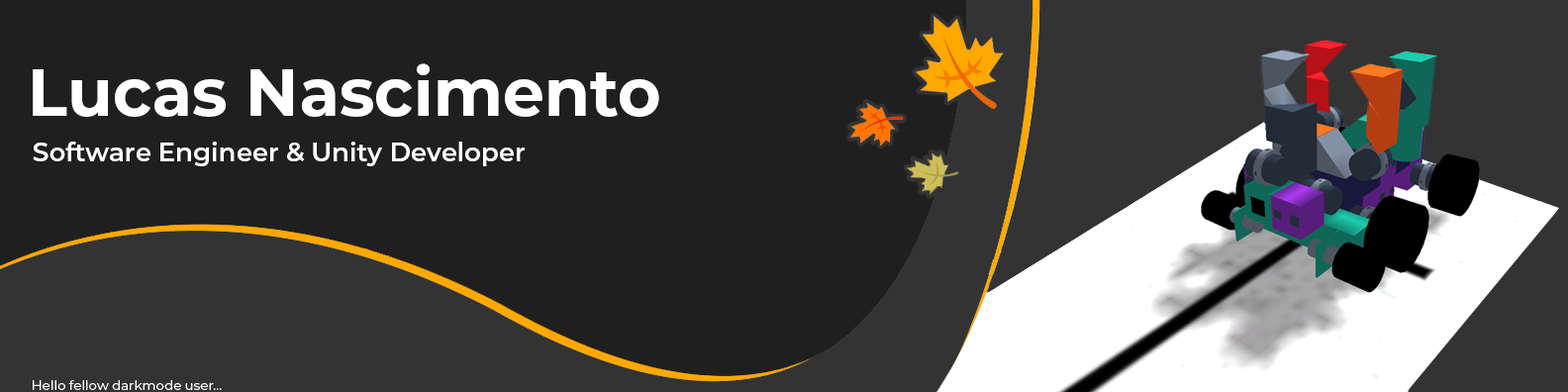
<style>
.page{position:relative;width:1568px;height:392px;background:#1f1f1f}
.page>*{position:absolute;margin:0}
.t1{font:65.9px "Montserrat-Bold";color:#ffffff}
.t2{font:25.7px "Montserrat-SemiBold";color:#ffffff}
.t3{font:13.3px "Montserrat-Regular";color:#ffffff}
</style>
<div class="page">
<p class="t1" style="left:33px;top:63px;width:626px;height:54px">Lucas Nascimento</p>
<p class="t2" style="left:33px;top:142px;width:492px;height:24px">Software Engineer &amp; Unity Developer</p>
<p class="t3" style="left:33px;top:380px;width:189px;height:10px">Hello fellow darkmode user...</p>
</div>
